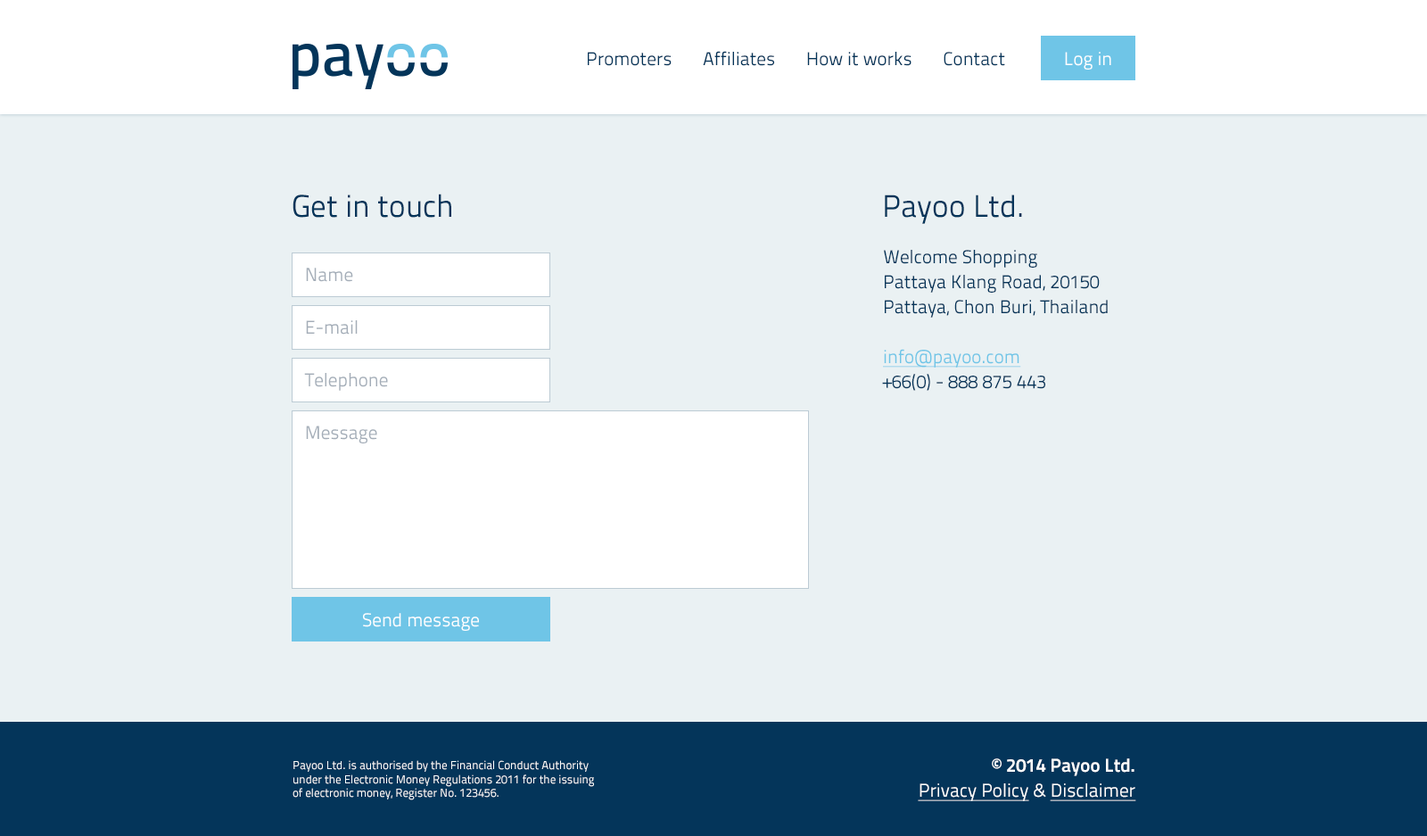
<style>
.page{position:relative;width:1427px;height:836px;background:#eaf1f3}
.page>*{position:absolute;margin:0}
.t1{font:18.7px "TitilliumText25L-400wt";color:#04355a}
.t2{font:18.7px "TitilliumText25L-400wt";color:#ffffff}
.t3{font:31.2px "TitilliumText25L-400wt";color:#04355a}
.t4{font:18.7px/25px "TitilliumText25L-400wt";color:#04355a}
.t5{font:18.7px/25px "TitilliumText25L-400wt";color:#6fc5e7;text-decoration:underline}
.t6{font:18.7px "TitilliumText25L-400wt";color:#a4adb8}
.t7{font:11.6px "TitilliumText25L-400wt";color:#ffffff}
.t8{font:18.7px/25px "TitilliumText25L-800wt";color:#ffffff}
.t9{font:18.7px/25px "TitilliumText25L-400wt";color:#ffffff;text-decoration:underline}
.t10{font:18.7px/25px "TitilliumText25L-400wt";color:#ffffff}
</style>
<div class="page">
<p class="t1" style="left:588px;top:51px;width:417px;height:15px">Promoters       Affiliates       How it works       Contact</p>
<p class="t2" style="left:1065px;top:52px;width:46px;height:18px">Log in</p>
<p class="t3" style="left:293px;top:194px;width:158px;height:24px">Get in touch</p>
<p class="t3" style="left:885px;top:194px;width:137px;height:30px">Payoo Ltd.</p>
<p class="t4" style="left:882px;top:250px;width:226px;height:141px">Welcome Shopping <br>Pattaya Klang Road, 20150<br>Pattaya, Chon Buri, Thailand<br><br><span class="t5">info@payoo.com<br></span>+66(0) - 888 875 443</p>
<p class="t6" style="left:306px;top:268px;width:47px;height:14px">Name</p>
<p class="t6" style="left:306px;top:320px;width:52px;height:14px">E-mail</p>
<p class="t6" style="left:304px;top:373px;width:84px;height:18px">Telephone</p>
<p class="t6" style="left:306px;top:425px;width:71px;height:18px">Message</p>
<p class="t2" style="left:363px;top:613px;width:116px;height:18px">Send message</p>
<p class="t7" style="left:293px;top:760px;width:301px;height:40px">Payoo Ltd. is authorised by the Financial Conduct Authority under the Electronic Money Regulations 2011 for the issuing of electronic money, Register No. 123456.</p>
<p class="t8" style="left:918px;top:758px;width:218px;height:43px;text-align:right">© 2014 Payoo Ltd.<br><span class="t9">Privacy Policy</span><span class="t10"> &amp; </span><span class="t9">Disclaimer</span></p>
</div>
